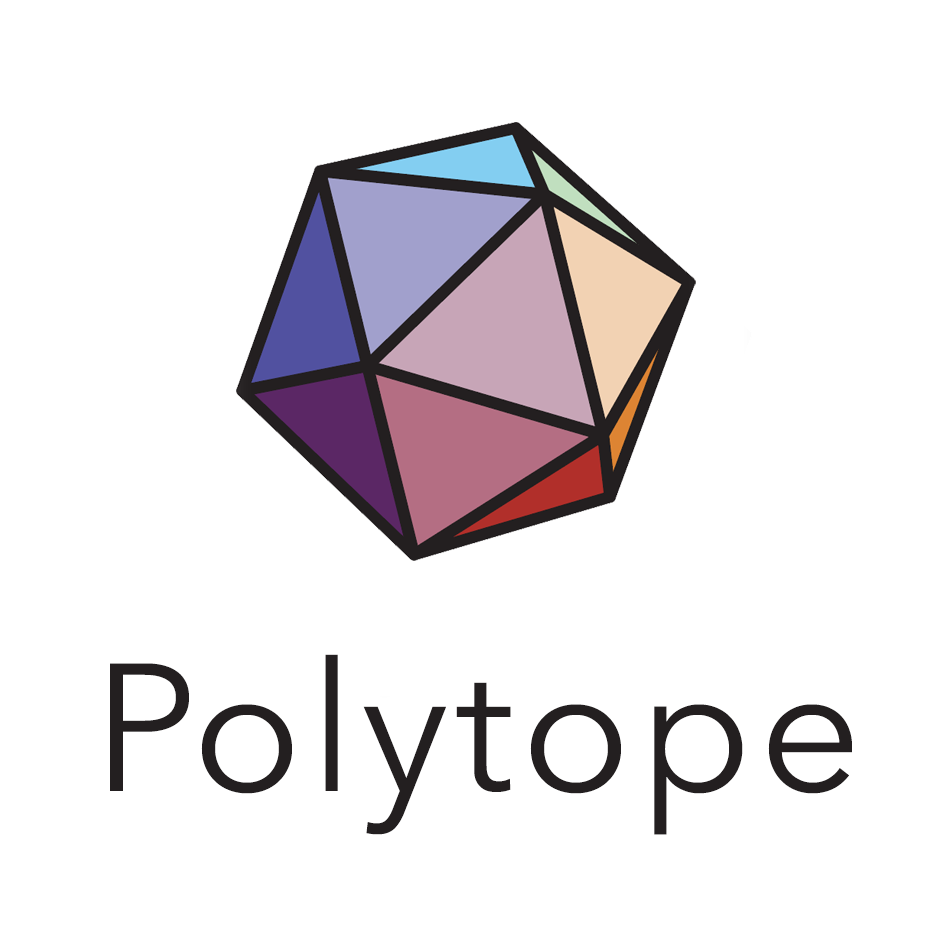
<style>
.page{position:relative;width:936px;height:936px;background:#ffffff}
.page>*{position:absolute;margin:0}
.t1{font:180px "AvenirNext-Regular";letter-spacing:0.04em;color:#231f20}
</style>
<div class="page">
<p class="t1" style="left:110px;top:654px;width:742px;height:181px">Polytope</p>
</div>
